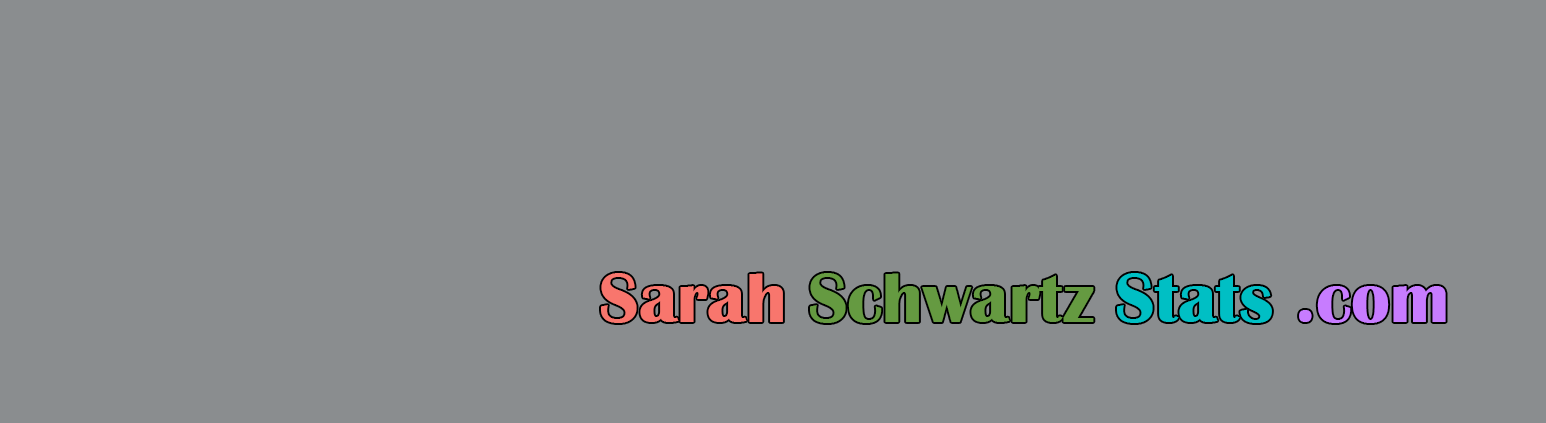
<style>
.page{position:relative;width:1546px;height:423px;background:#8a8d8f}
.page>*{position:absolute;margin:0}
.t1{font:72px "BritannicBold";color:#659a41}
.t2{font:72px "BritannicBold";color:#f8766d}
.t3{font:72px "BritannicBold";color:#00bfc4}
.t4{font:72px "BritannicBold";color:#c77cff}
</style>
<div class="page">
<p class="t1" style="left:601px;top:273px;width:845px;height:50px"><span class="t2">Sarah </span>Schwartz <span class="t3">Stats </span><span class="t4">.com</span></p>
</div>
